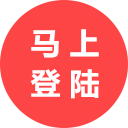
<style>
.page{position:relative;width:128px;height:128px;background:#fd4545}
.page>*{position:absolute;margin:0}
.t1{font:30px/40px "MicrosoftYaHei-Bold";color:#ffffff}
</style>
<div class="page">
<p class="t1" style="left:30px;top:29px;width:69px;height:70px;text-align:center">马 上<br>登 陆</p>
</div>
